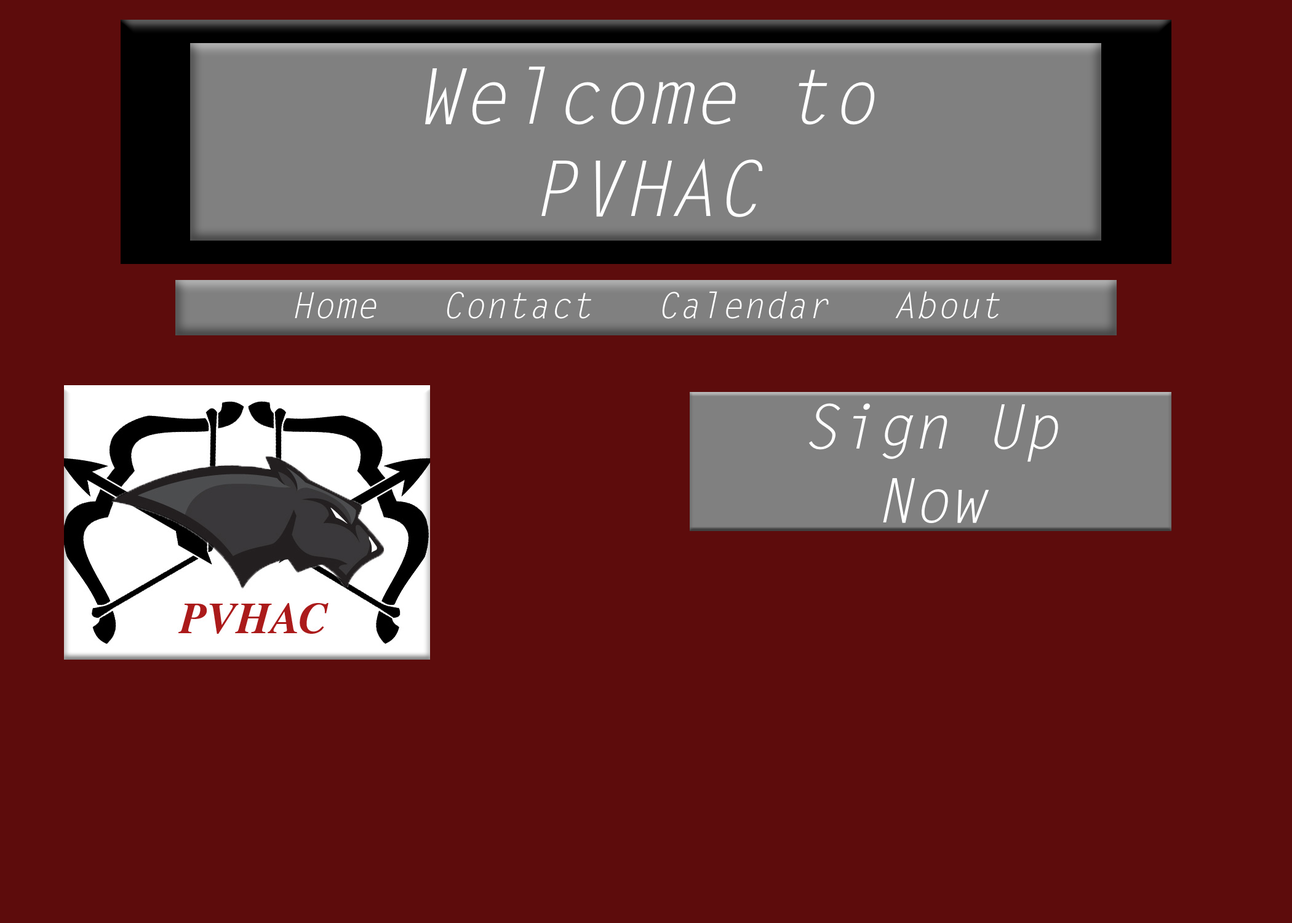
<style>
.page{position:relative;width:1292px;height:923px;background:#5d0c0c}
.page>*{position:absolute;margin:0}
.t1{font:76.9px "LetterGothicStd-Slanted";color:#ffffff}
.t2{font:35.9px "LetterGothicStd-Slanted";color:#ffffff}
.t3{font:61.5px "LetterGothicStd-Slanted";color:#ffffff}
</style>
<div class="page">
<p class="t1" style="left:425px;top:66px;width:450px;height:151px;text-align:center">Welcome to <br>PVHAC</p>
<p class="t2" style="left:295px;top:291px;width:705px;height:28px">Home   Contact   Calendar   About</p>
<p class="t3" style="left:809px;top:403px;width:249px;height:121px;text-align:center">Sign Up <br>Now</p>
</div>
